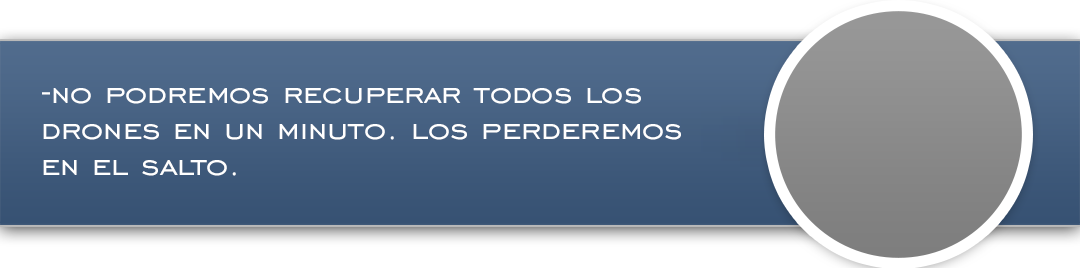
<style>
.page{position:relative;width:1080px;height:268px}
.page>*{position:absolute;margin:0}
.t1{font:36px/36px "EngraversGothicBT-Regular";color:#ffffff;scale:1.06 1}
</style>
<div class="page">
<p class="t1" style="left:42px;top:88px;width:639px;height:88px">-no podremos recuperar todos los drones en un minuto. los perderemos en el salto.</p>
</div>
